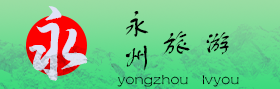
<style>
.page{position:relative;width:280px;height:89px}
.page>*{position:absolute;margin:0}
.t1{font:100px "Slidexiaxing-Regular";color:#dfe2f6}
.t2{font:30.5px "FZSTK--GBK1-0";color:#010101}
.t3{font:16.7px "FZSTK--GBK1-0";color:#010101}
</style>
<div class="page">
<p class="t1" style="left:29px;top:6px;width:59px;height:75px">永</p>
<p class="t2" style="left:125px;top:11px;width:24px;height:26px">永</p>
<p class="t2" style="left:163px;top:31px;width:27px;height:24px">旅</p>
<p class="t2" style="left:206px;top:32px;width:23px;height:23px">游</p>
<p class="t2" style="left:125px;top:45px;width:22px;height:26px">州</p>
<p class="t3" style="left:117px;top:74px;width:122px;height:13px">yongzhou    lvyou</p>
</div>
